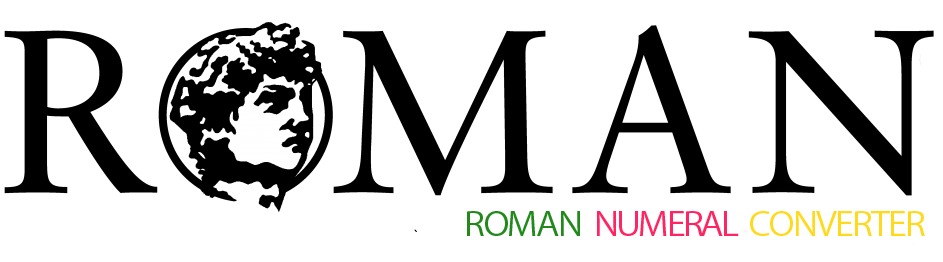
<style>
.page{position:relative;width:943px;height:262px;background:#ffffff}
.page>*{position:absolute;margin:0}
.t1{font:32.6px "KozGoPr6N-Regular";letter-spacing:-0.05em;color:#ffd91c;scale:1.09 1}
.t2{font:32.6px "KozGoPr6N-Regular";letter-spacing:-0.05em;color:#22891b;scale:1.09 1}
.t3{font:32.6px "KozGoPr6N-Regular";letter-spacing:-0.075em;color:#ff2562;scale:1.09 1}
.t4{font:12px "KozGoPr6N-Regular";color:#000000}
</style>
<div class="page">
<p class="t1" style="left:467px;top:211px;width:458px;height:25px"><span class="t2">ROMAN  </span><span class="t3">NUMERAL  </span>CONVERTER</p>
<p class="t4" style="left:414px;top:229px;width:3px;height:3px">`</p>
</div>
